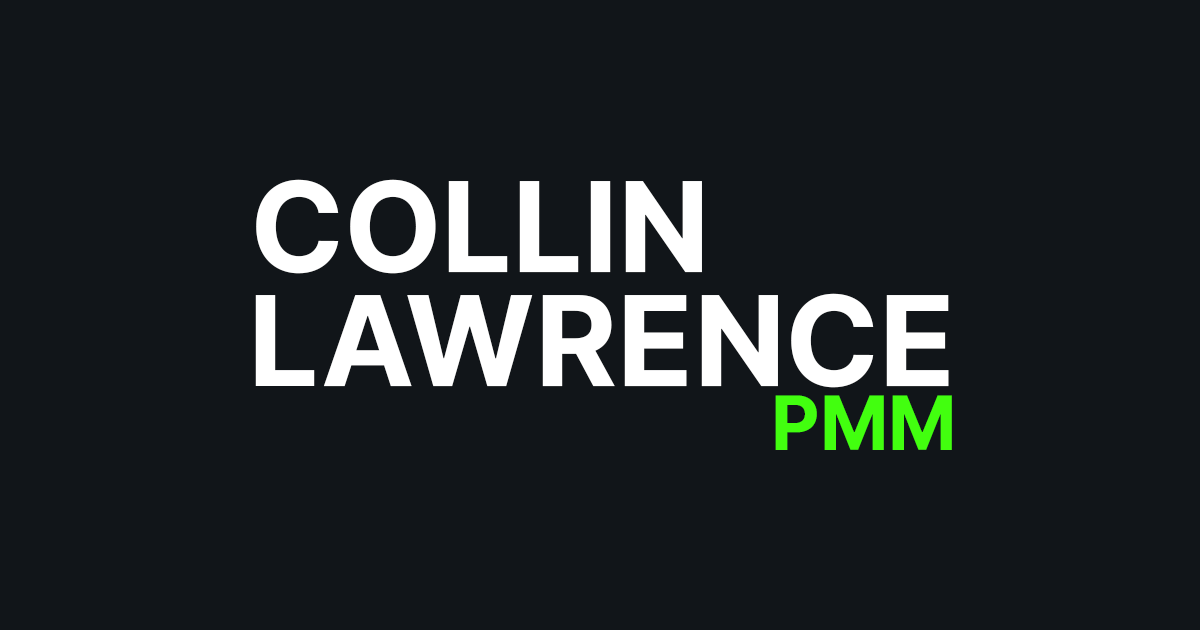
<style>
.page{position:relative;width:1200px;height:630px;background:#111519}
.page>*{position:absolute;margin:0}
.t1{font:125px "Inter-Bold";color:#ffffff}
.t2{font:75px "Inter-Bold";color:#42ff0f}
</style>
<div class="page">
<p class="t1" style="left:256px;top:179px;width:446px;height:95px">COLLIN</p>
<p class="t1" style="left:255px;top:293px;width:694px;height:95px">LAWRENCE</p>
<p class="t2" style="left:775px;top:395px;width:177px;height:55px">PMM</p>
</div>
